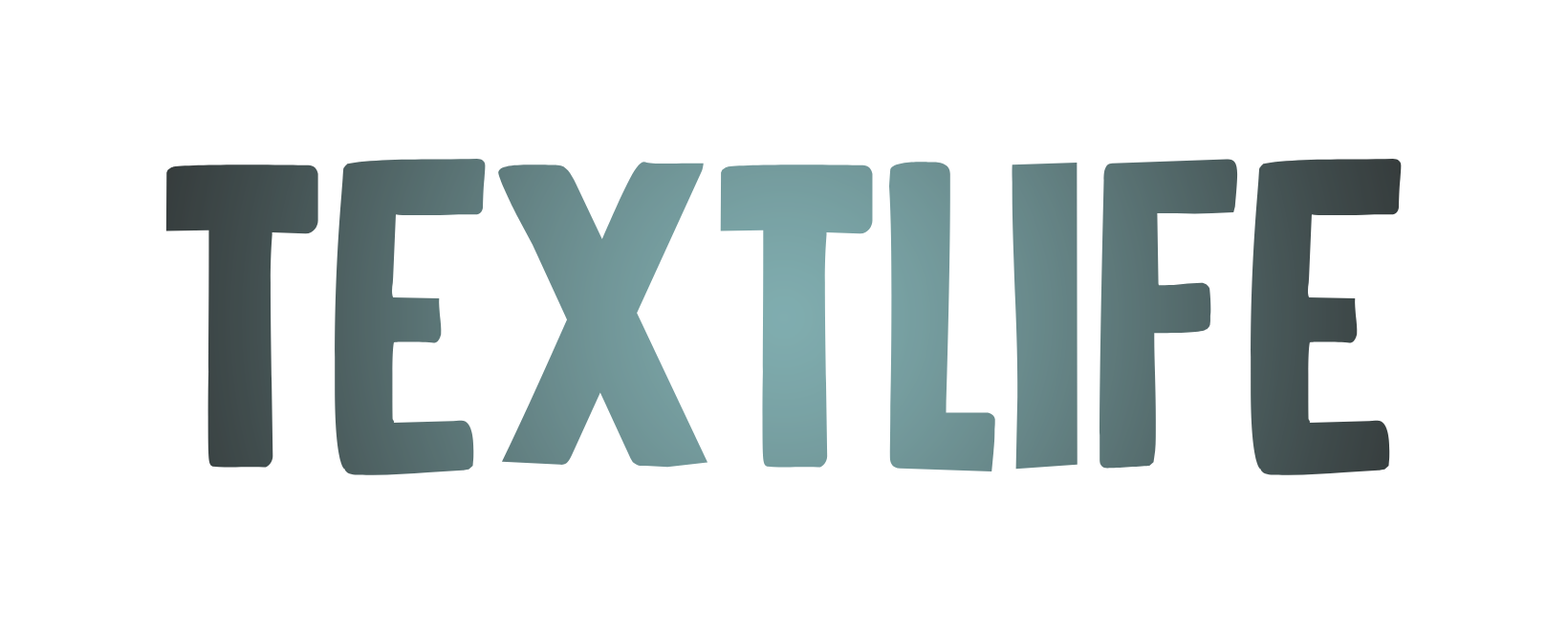
<style>
.page{position:relative;width:1568px;height:635px;background:#ffffff}
.page>*{position:absolute;margin:0}
.t1{font:373.8px "SittingDuckDEMO-Regular"}
</style>
<div class="page">
<p class="t1" style="left:165px;top:159px;width:1237px;height:316px">TEXTLIFE</p>
</div>
